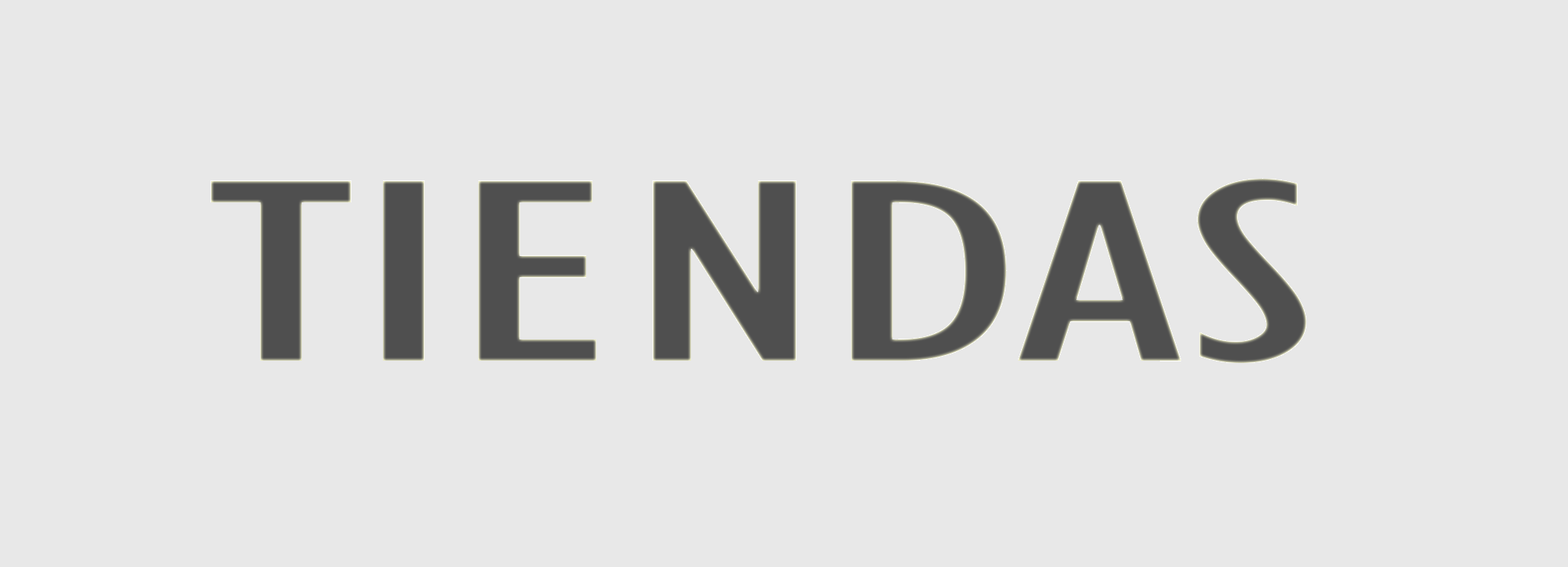
<style>
.page{position:relative;width:1568px;height:567px;background:#e8e8e8}
.page>*{position:absolute;margin:0}
.t1{font:269.1px "GillSansMT-Condensed";color:#4f4f4f;scale:1.78 1}
</style>
<div class="page">
<p class="t1" style="left:210px;top:178px;width:1096px;height:185px">TIENDAS</p>
</div>
